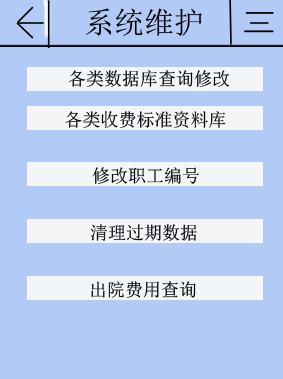
<style>
.page{position:relative;width:283px;height:379px;background:#b2caf6}
.page>*{position:absolute;margin:0}
.t1{font:30.1px "SimSun";color:#000000}
.t2{font:18px "SimSun";color:#000206}
</style>
<div class="page">
<p class="t1" style="left:85px;top:8px;width:117px;height:28px">系统维护</p>
<p class="t2" style="left:69px;top:70px;width:161px;height:17px">各类数据库查询修改</p>
<p class="t2" style="left:65px;top:111px;width:161px;height:17px">各类收费标准资料库</p>
<p class="t2" style="left:92px;top:167px;width:107px;height:17px">修改职工编号</p>
<p class="t2" style="left:90px;top:224px;width:107px;height:17px">清理过期数据</p>
<p class="t2" style="left:91px;top:281px;width:105px;height:17px">出院费用查询</p>
</div>
